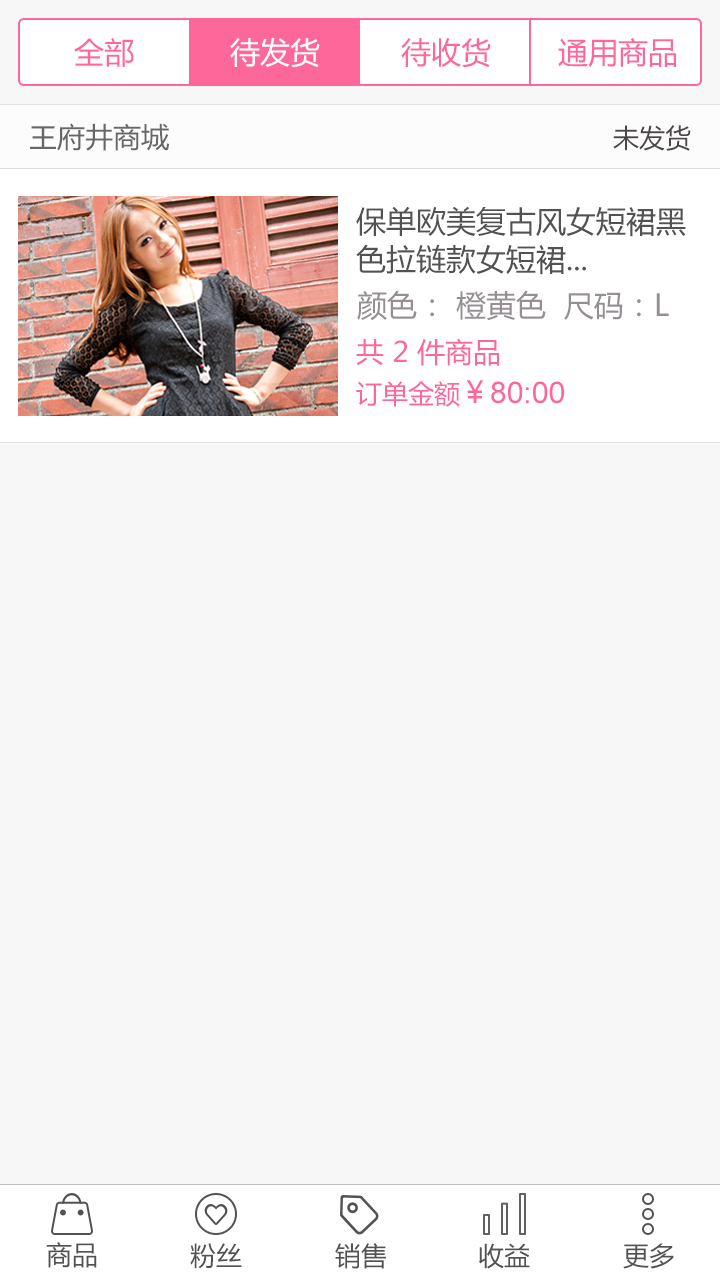
<style>
.page{position:relative;width:720px;height:1280px;background:#f7f7f7}
.page>*{position:absolute;margin:0}
.t1{font:30px "MicrosoftYaHei";color:#fd679a}
.t2{font:30px "MicrosoftYaHei";color:#ffffff}
.t3{font:28px "MicrosoftYaHei";color:#666666}
.t4{font:26px "MicrosoftYaHei";color:#4a4649}
.t5{font:30px/38px "MicrosoftYaHei";color:#525252}
.t6{font:30px "MicrosoftYaHei";color:#958f93}
.t7{font:28px "MicrosoftYaHei";color:#fd679a}
.t8{font:30px "ArialMT";color:#fd679a}
.t9{font:26px "MicrosoftYaHei";color:#fd679a}
.t10{font:26px "MicrosoftYaHei";color:#525252}
</style>
<div class="page">
<p class="t1" style="left:74px;top:38px;width:60px;height:29px">全部</p>
<p class="t2" style="left:230px;top:37px;width:90px;height:31px">待发货</p>
<p class="t1" style="left:401px;top:38px;width:90px;height:30px">待收货</p>
<p class="t1" style="left:558px;top:38px;width:118px;height:29px">通用商品</p>
<p class="t3" style="left:30px;top:123px;width:139px;height:28px">王府井商城</p>
<p class="t4" style="left:613px;top:125px;width:78px;height:26px">未发货</p>
<p class="t5" style="left:356px;top:206px;width:330px;height:69px">保单欧美复古风女短裙黑<br>色拉链款女短裙...</p>
<p class="t6" style="left:357px;top:290px;width:312px;height:31px">颜色： 橙黄色  尺码：L</p>
<p class="t7" style="left:356px;top:338px;width:143px;height:28px">共 2 件商品</p>
<p class="t8" style="left:356px;top:380px;width:208px;height:27px"><span class="t9">订单金额</span><span class="t1">￥</span>80:00</p>
<p class="t10" style="left:46px;top:1242px;width:51px;height:26px">商品</p>
<p class="t10" style="left:190px;top:1243px;width:52px;height:26px">粉丝</p>
<p class="t10" style="left:335px;top:1243px;width:51px;height:26px">销售</p>
<p class="t10" style="left:479px;top:1243px;width:51px;height:26px">收益</p>
<p class="t10" style="left:623px;top:1243px;width:51px;height:26px">更多</p>
</div>
